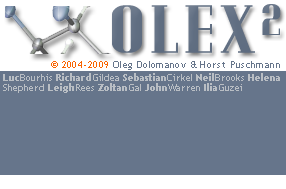
<style>
.page{position:relative;width:286px;height:189px;background:#66758b}
.page>*{position:absolute;margin:0}
.t1{font:59.1px "PotteryBarn";letter-spacing:0.05em;color:#606e82;scale:1.31 1}
.t2{font:66px "PotteryBarn";letter-spacing:0.05em;color:#606e82;scale:1.17 1}
.t3{font:10.3px "TrebuchetMS";letter-spacing:0.04em;color:#fa6400}
.t4{font:10.3px "TrebuchetMS";letter-spacing:0.05em;color:#fa6400}
.t5{font:10.4px "TrebuchetMS";letter-spacing:0.036em;color:#66758b}
.t6{font:10px/10px "TrebuchetMS-Bold";color:#b9bec4}
.t7{font:10px/10px "TrebuchetMS";color:#b9bec4}
</style>
<div class="page">
<p class="t1" style="left:112px;top:4px;width:169px;height:49px">OLEX<span class="t2">2</span></p>
<p class="t3" style="left:51px;top:61px;width:57px;height:7px"><span class="t4">© </span>2004-2009</p>
<p class="t5" style="left:113px;top:61px;width:167px;height:9px">Oleg Dolomanov &amp; Horst Puschmann</p>
<p class="t6" style="left:3px;top:73px;width:277px;height:20px">Luc<span class="t7">Bourhis </span>Richard<span class="t7">Gildea </span>Sebastian<span class="t7">Cirkel </span>Neil<span class="t7">Brooks </span>Helena<br><span class="t7">Shepherd </span>Leigh<span class="t7">Rees </span>Zoltan<span class="t7">Gal </span>John<span class="t7">Warren </span>Ilia<span class="t7">Guzei</span></p>
</div>
